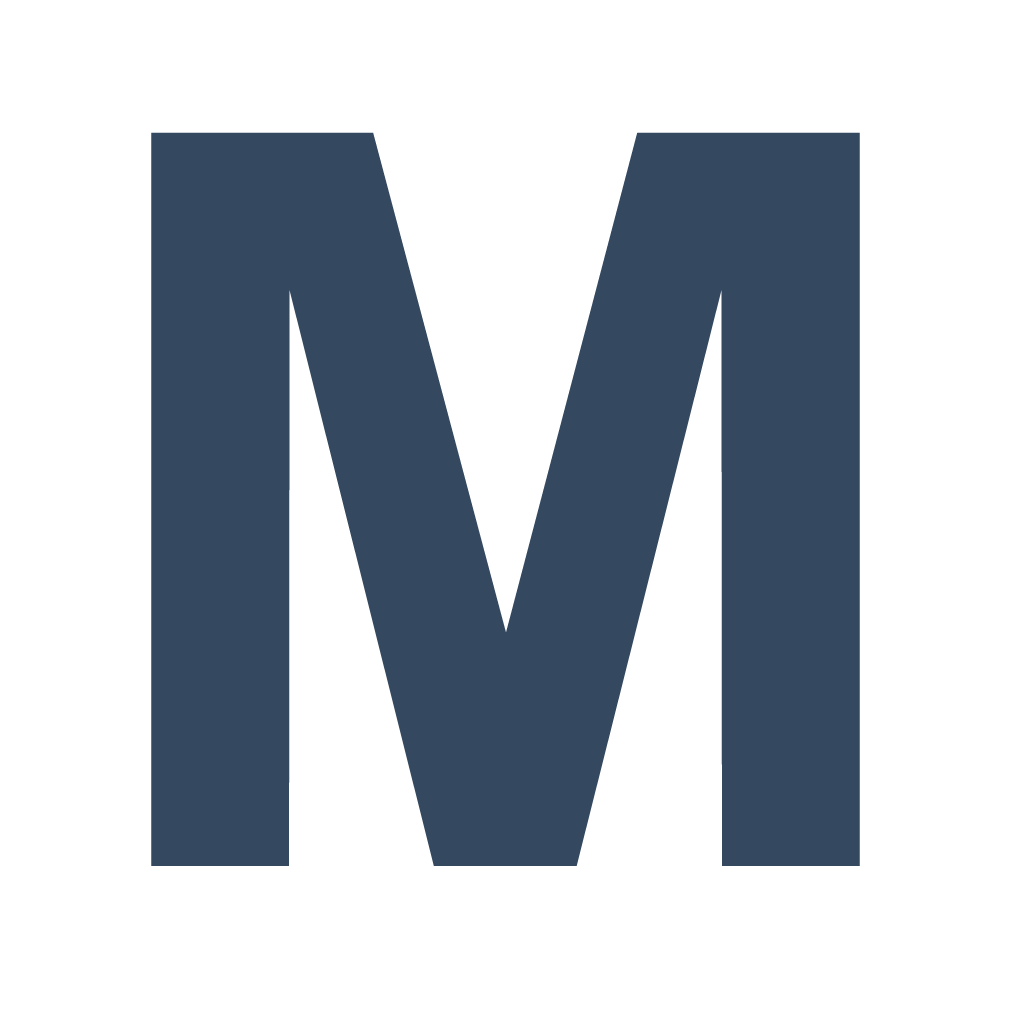
<style>
.page{position:relative;width:1024px;height:1024px;background:#ffffff}
.page>*{position:absolute;margin:0}
.t1{font:1024px "Arial-BoldMT";color:#344860}
</style>
<div class="page">
<p class="t1" style="left:151px;top:132px;width:709px;height:734px">M</p>
</div>
